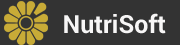
<style>
.page{position:relative;width:180px;height:45px;background:#333333}
.page>*{position:absolute;margin:0}
.t1{font:25px "Roboto-Bold";color:#f7f6f6}
</style>
<div class="page">
<p class="t1" style="left:64px;top:13px;width:102px;height:21px">NutriSoft</p>
</div>
